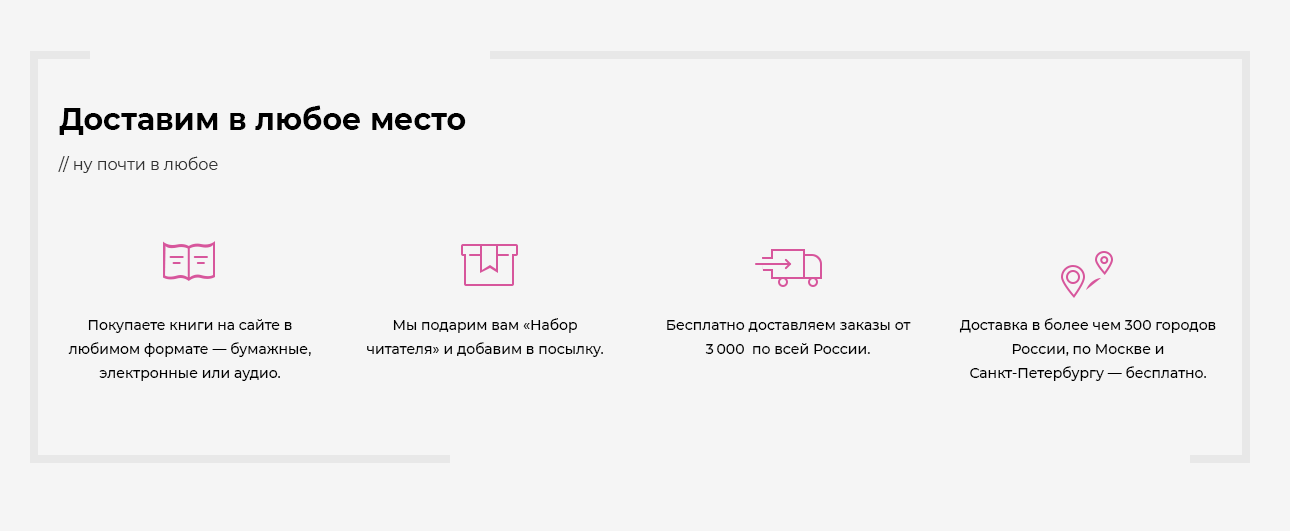
<style>
.page{position:relative;width:1290px;height:531px;background:#f5f5f5}
.page>*{position:absolute;margin:0}
.t1{font:30px "Montserrat-Bold";color:#000000}
.t2{font:16px "Montserrat-Regular";color:#333333}
.t3{font:14px/24px "Montserrat-Medium";color:#000000}
</style>
<div class="page">
<p class="t1" style="left:59px;top:105px;width:407px;height:30px">Доставим в любое место</p>
<p class="t2" style="left:58px;top:156px;width:160px;height:17px">// ну почти в любое</p>
<p class="t3" style="left:367px;top:318px;width:236px;height:39px;text-align:center">Мы подарим вам «Набор читателя» и добавим в посылку.</p>
<p class="t3" style="left:959px;top:318px;width:257px;height:63px;text-align:center">Доставка в более чем 300 городов России, по Москве и Санкт-Петербургу — бесплатно.</p>
<p class="t3" style="left:68px;top:319px;width:243px;height:62px;text-align:center">Покупаете книги на сайте в любимом формате — бумажные, электронные или аудио.</p>
<p class="t3" style="left:667px;top:320px;width:244px;height:34px;text-align:center">Бесплатно доставляем заказы от <br>3 000  по всей России.</p>
</div>
